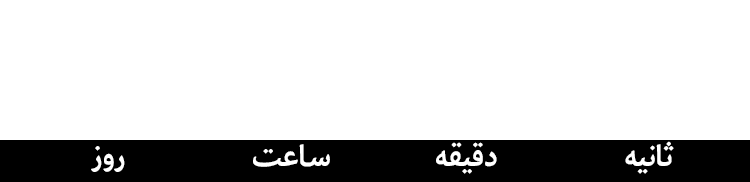
<style>
.page{position:relative;width:750px;height:182px;background:#ffffff}
.page>*{position:absolute;margin:0}
.t1{font:30px "PalatinoSansW23-Bold";color:#ffffff}
</style>
<div class="page">
<p class="t1" style="left:91px;top:141px;width:583px;height:33px">ثانیه                 دقیقه              ساعت                 روز</p>
</div>
